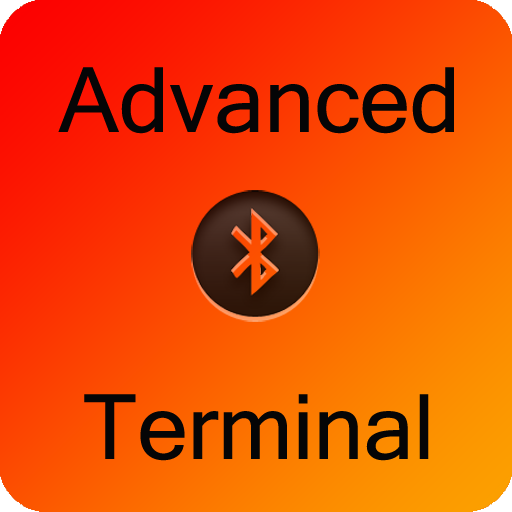
<style>
.page{position:relative;width:512px;height:512px}
.page>*{position:absolute;margin:0}
.t1{font:90.2px "MicrosoftSansSerif";color:#060606}
</style>
<div class="page">
<p class="t1" style="left:58px;top:67px;width:396px;height:67px">Advanced</p>
<p class="t1" style="left:84px;top:394px;width:345px;height:67px">Terminal</p>
</div>
